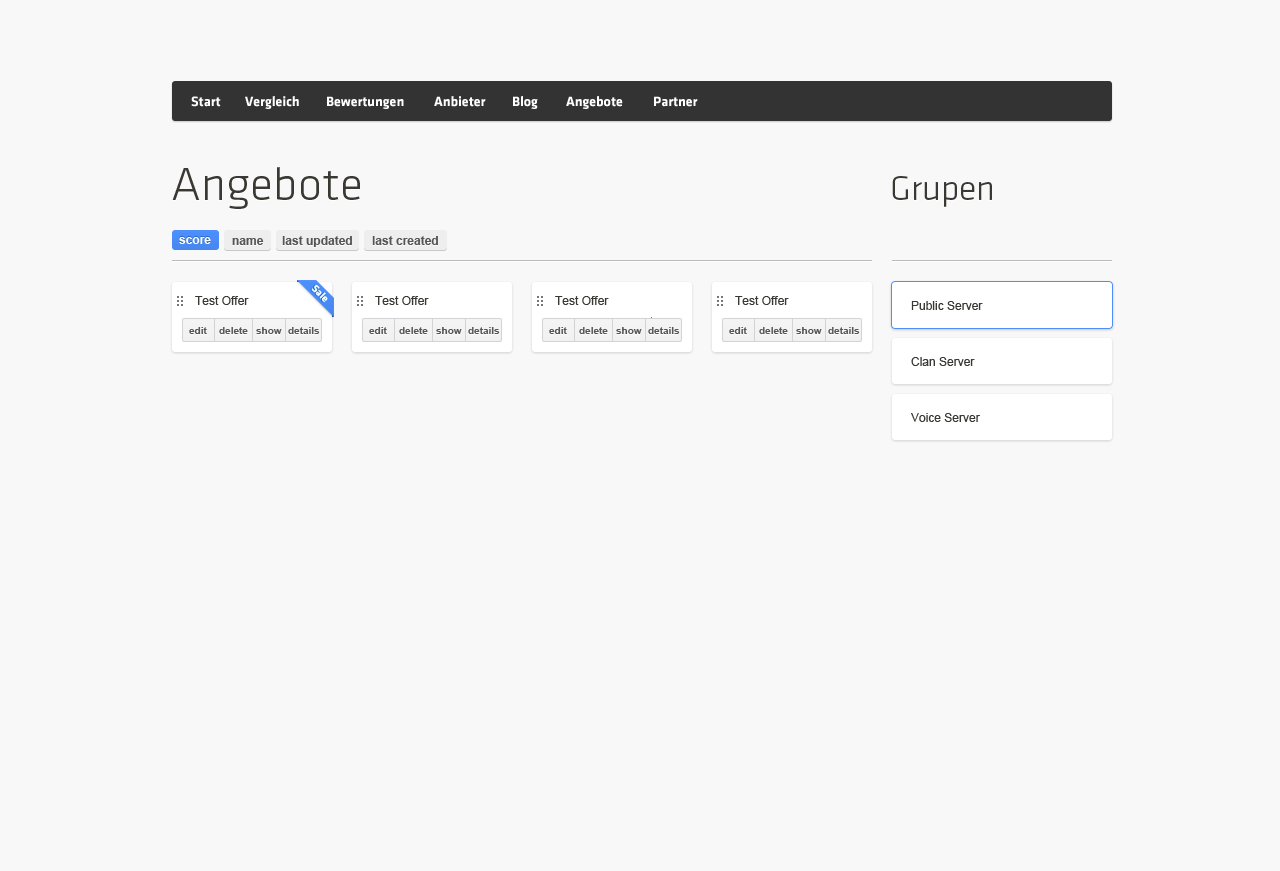
<style>
.page{position:relative;width:1280px;height:871px;background:#f8f8f8}
.page>*{position:absolute;margin:0}
.t1{font:14px "KlavikaBold-Bold";color:#ffffff}
.t2{font:48px "KlavikaLight-Plain";color:#393832}
.t3{font:36px "KlavikaLight-Plain";color:#393832}
.t4{font:12px "Arial-BoldMT";color:#ffffff}
.t5{font:12px "Arial-BoldMT";color:#555555}
.t6{font:10.5px "KlavikaBold-Bold";color:#ffffff}
.t7{font:12px "ArialMT";color:#393832}
.t8{font:10px "Arial-BoldMT";color:#555555}
</style>
<div class="page">
<p class="t1" style="left:191px;top:96px;width:30px;height:11px">Start</p>
<p class="t1" style="left:245px;top:96px;width:54px;height:13px">Vergleich</p>
<p class="t1" style="left:327px;top:96px;width:77px;height:13px">Bewertungen</p>
<p class="t1" style="left:434px;top:96px;width:52px;height:11px">Anbieter</p>
<p class="t1" style="left:513px;top:96px;width:25px;height:13px">Blog</p>
<p class="t1" style="left:566px;top:96px;width:57px;height:13px">Angebote</p>
<p class="t1" style="left:654px;top:96px;width:44px;height:11px">Partner</p>
<p class="t2" style="left:172px;top:167px;width:188px;height:42px">Angebote</p>
<p class="t3" style="left:892px;top:176px;width:100px;height:31px">Grupen</p>
<p class="t4" style="left:179px;top:237px;width:32px;height:7px">score</p>
<p class="t5" style="left:232px;top:238px;width:32px;height:7px">name</p>
<p class="t5" style="left:282px;top:236px;width:70px;height:11px">last updated</p>
<p class="t5" style="left:372px;top:236px;width:66px;height:9px">last created</p>
<p class="t6" style="left:311px;top:285px;width:17px;height:18px;rotate:45deg">Sale</p>
<p class="t7" style="left:195px;top:296px;width:54px;height:9px">Test Offer</p>
<p class="t7" style="left:375px;top:296px;width:54px;height:9px">Test Offer</p>
<p class="t7" style="left:555px;top:296px;width:54px;height:9px">Test Offer</p>
<p class="t7" style="left:735px;top:296px;width:54px;height:9px">Test Offer</p>
<p class="t7" style="left:911px;top:301px;width:72px;height:9px">Public Server</p>
<p class="t8" style="left:189px;top:327px;width:18px;height:7px">edit</p>
<p class="t8" style="left:219px;top:327px;width:29px;height:7px">delete</p>
<p class="t8" style="left:256px;top:327px;width:26px;height:7px">show</p>
<p class="t8" style="left:288px;top:327px;width:32px;height:7px">details</p>
<p class="t8" style="left:369px;top:327px;width:18px;height:7px">edit</p>
<p class="t8" style="left:399px;top:327px;width:29px;height:7px">delete</p>
<p class="t8" style="left:436px;top:327px;width:26px;height:7px">show</p>
<p class="t8" style="left:468px;top:327px;width:32px;height:7px">details</p>
<p class="t8" style="left:549px;top:327px;width:18px;height:7px">edit</p>
<p class="t8" style="left:579px;top:327px;width:29px;height:7px">delete</p>
<p class="t8" style="left:616px;top:327px;width:26px;height:7px">show</p>
<p class="t8" style="left:648px;top:327px;width:32px;height:7px">details</p>
<p class="t8" style="left:729px;top:327px;width:18px;height:7px">edit</p>
<p class="t8" style="left:759px;top:327px;width:29px;height:7px">delete</p>
<p class="t8" style="left:796px;top:327px;width:26px;height:7px">show</p>
<p class="t8" style="left:828px;top:327px;width:32px;height:7px">details</p>
<p class="t7" style="left:911px;top:357px;width:64px;height:9px">Clan Server</p>
<p class="t7" style="left:911px;top:413px;width:69px;height:9px">Voice Server</p>
</div>
